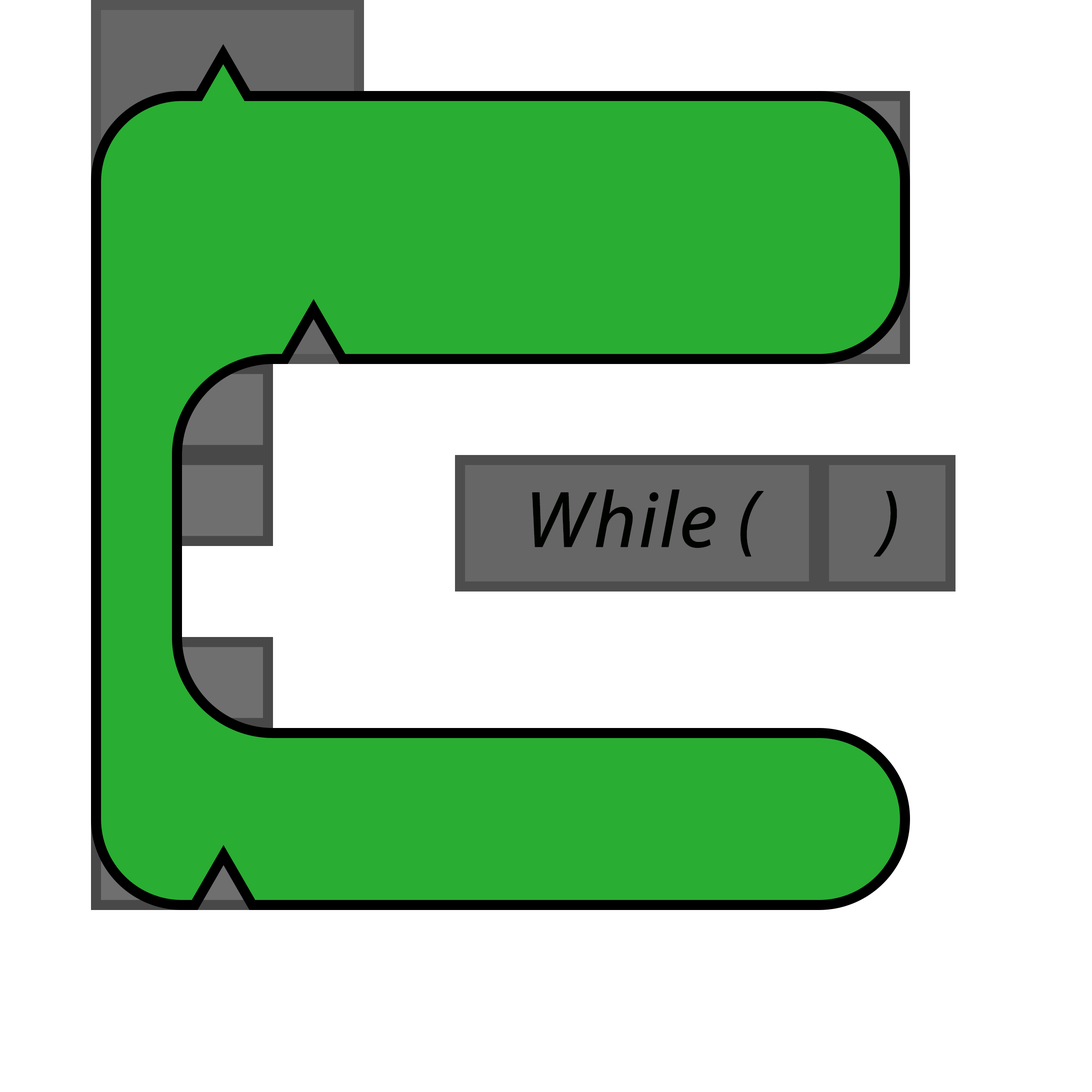
<style>
.page{position:relative;width:1092px;height:1092px;background:#ffffff}
.page>*{position:absolute;margin:0}
.t1{font:80.3px "MyriadPro-It";color:#000300;font-weight:bold}
</style>
<div class="page">
<p class="t1" style="left:532px;top:489px;width:365px;height:68px">While (       )</p>
</div>
